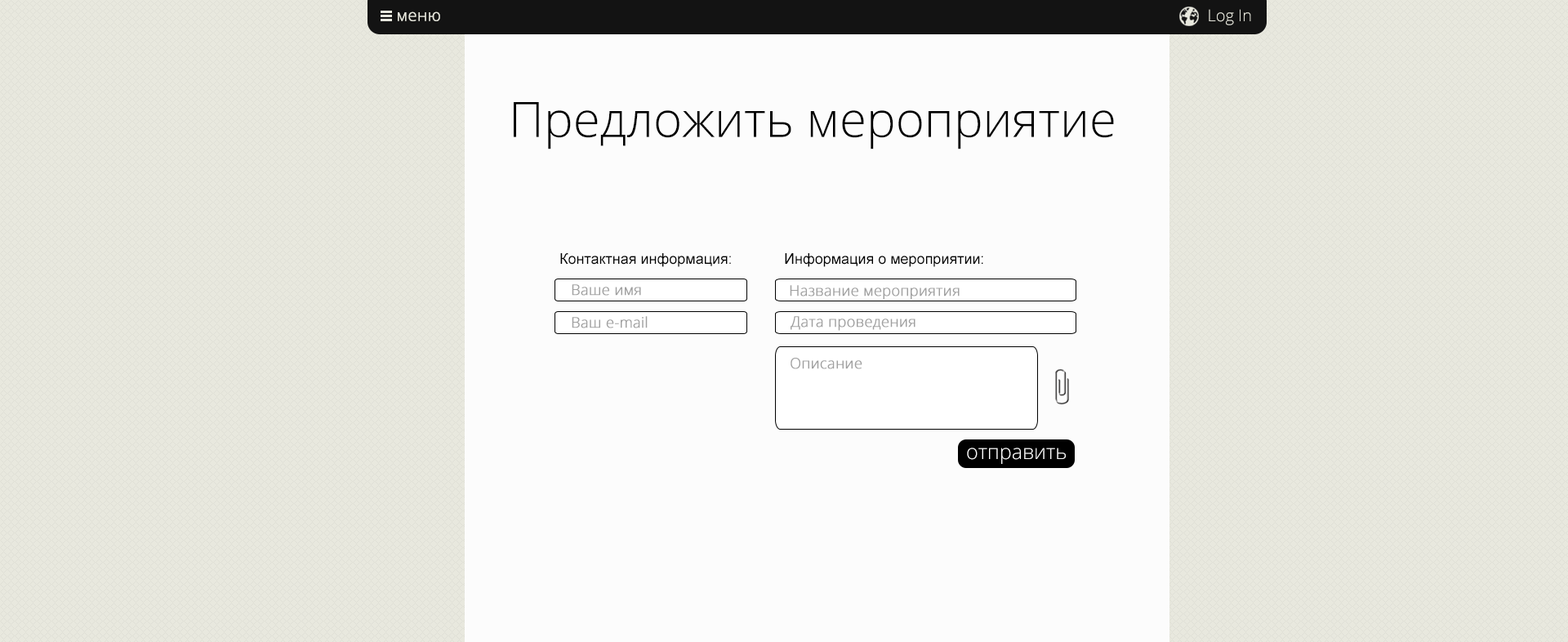
<style>
.page{position:relative;width:1568px;height:642px;background:#fcfcfc}
.page>*{position:absolute;margin:0}
.t1{font:16.3px "OpenSans-Light";color:#e8e8de;font-weight:bold}
.t2{font:16.3px "OpenSans-Light";color:#e8e8de}
.t3{font:49px "OpenSans-Light";color:#000000}
.t4{font:14.7px "ArialMT";color:#000000}
.t5{font:14.7px "OpenSans-Light";color:#a0a0a0;font-weight:bold}
.t6{font:20.4px "OpenSans-Light";color:#ffffff}
</style>
<div class="page">
<p class="t1" style="left:398px;top:11px;width:42px;height:10px">меню</p>
<p class="t2" style="left:1209px;top:9px;width:42px;height:16px">Log In</p>
<p class="t3" style="left:514px;top:102px;width:600px;height:47px">Предложить мероприятие</p>
<p class="t4" style="left:560px;top:253px;width:171px;height:14px">Контактная информация:</p>
<p class="t4" style="left:785px;top:253px;width:198px;height:14px">Информация о мероприятии:</p>
<p class="t5" style="left:572px;top:284px;width:69px;height:12px">Ваше имя</p>
<p class="t5" style="left:790px;top:285px;width:170px;height:15px">Название мероприятия</p>
<p class="t5" style="left:572px;top:316px;width:76px;height:12px">Ваш e-mail</p>
<p class="t5" style="left:791px;top:316px;width:124px;height:15px">Дата проведения</p>
<p class="t5" style="left:791px;top:358px;width:71px;height:11px">Описание</p>
<p class="t6" style="left:967px;top:448px;width:99px;height:16px">отправить</p>
</div>
